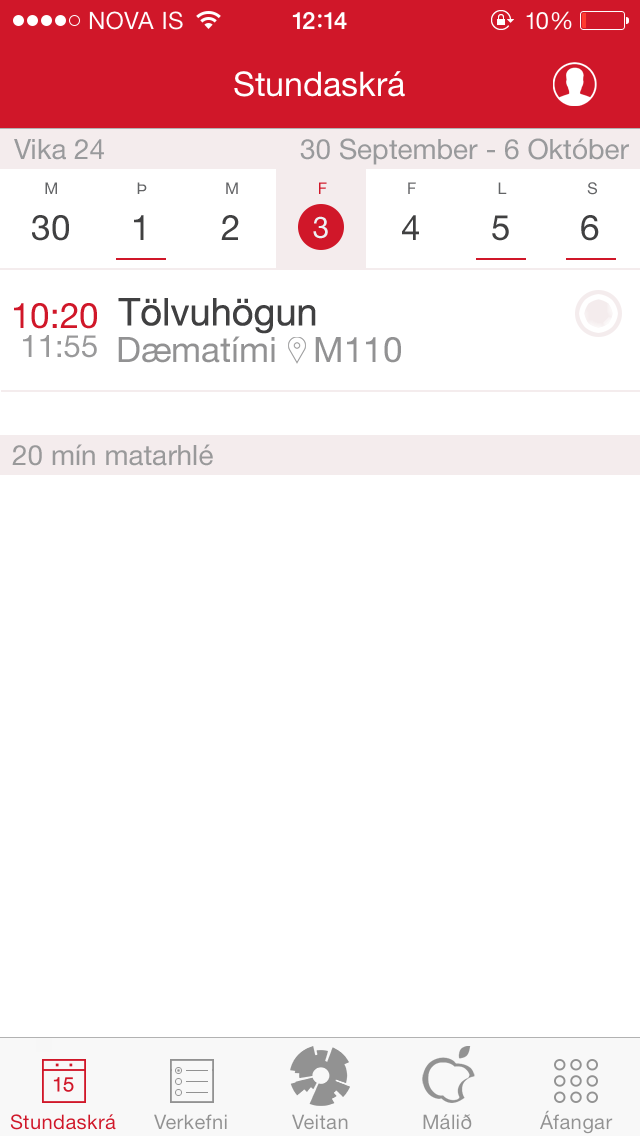
<style>
.page{position:relative;width:640px;height:1136px;background:#ffffff}
.page>*{position:absolute;margin:0}
.t1{font:28px "HelveticaNeue";color:#999a9c}
.t2{font:16px "HelveticaNeue";color:#636466}
.t3{font:16px "HelveticaNeue";color:#d01729}
.t4{font:35px "HelveticaNeue";color:#404041}
.t5{font:30px "HelveticaNeue";color:#ecf1f4}
.t6{font:35px "HelveticaNeue";color:#d01729}
.t7{font:38px "HelveticaNeue";color:#404041}
.t8{font:31px "HelveticaNeue";color:#99999a}
.t9{font:35px "HelveticaNeue";color:#929293}
.t10{font:28px "HelveticaNeue";color:#99999a}
</style>
<div class="page">
<p class="t1" style="left:14px;top:139px;width:90px;height:21px">Vika 24</p>
<p class="t1" style="left:300px;top:138px;width:329px;height:27px">30 September - 6 Október</p>
<p class="t2" style="left:45px;top:182px;width:12px;height:12px">M</p>
<p class="t2" style="left:137px;top:182px;width:10px;height:12px">Þ</p>
<p class="t2" style="left:226px;top:182px;width:12px;height:12px">M</p>
<p class="t3" style="left:319px;top:182px;width:8px;height:12px">F</p>
<p class="t2" style="left:408px;top:182px;width:8px;height:12px">F</p>
<p class="t2" style="left:498px;top:182px;width:9px;height:12px">L</p>
<p class="t2" style="left:587px;top:182px;width:10px;height:13px">S</p>
<p class="t4" style="left:32px;top:215px;width:37px;height:26px">30</p>
<p class="t4" style="left:134px;top:215px;width:10px;height:25px">1</p>
<p class="t4" style="left:221px;top:215px;width:18px;height:25px">2</p>
<p class="t5" style="left:313px;top:216px;width:15px;height:23px">3</p>
<p class="t4" style="left:402px;top:215px;width:17px;height:25px">4</p>
<p class="t4" style="left:492px;top:215px;width:17px;height:26px">5</p>
<p class="t4" style="left:581px;top:215px;width:18px;height:26px">6</p>
<p class="t6" style="left:14px;top:303px;width:83px;height:26px">10:20</p>
<p class="t7" style="left:118px;top:298px;width:198px;height:36px">Tölvuhögun</p>
<p class="t8" style="left:23px;top:335px;width:74px;height:23px">11:55</p>
<p class="t9" style="left:118px;top:336px;width:157px;height:27px">Dæmatími</p>
<p class="t9" style="left:315px;top:337px;width:86px;height:26px">M110</p>
<p class="t10" style="left:12px;top:444px;width:201px;height:22px">20 mín matarhlé</p>
</div>
